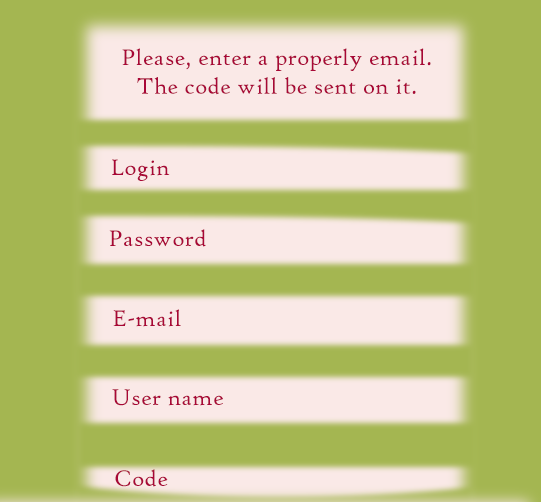
<style>
.page{position:relative;width:541px;height:502px;background:#a4b651}
.page>*{position:absolute;margin:0}
.t1{font:24px "HighTowerText-Reg";color:#a80737}
</style>
<div class="page">
<p class="t1" style="left:122px;top:48px;width:309px;height:47px;text-align:center">Please, enter a properly email. <br>The code will be sent on it.</p>
<p class="t1" style="left:112px;top:159px;width:58px;height:22px">Login</p>
<p class="t1" style="left:109px;top:229px;width:97px;height:18px">Password</p>
<p class="t1" style="left:113px;top:309px;width:68px;height:18px">E-mail</p>
<p class="t1" style="left:112px;top:389px;width:111px;height:17px">User name</p>
<p class="t1" style="left:115px;top:469px;width:53px;height:18px">Code</p>
</div>
